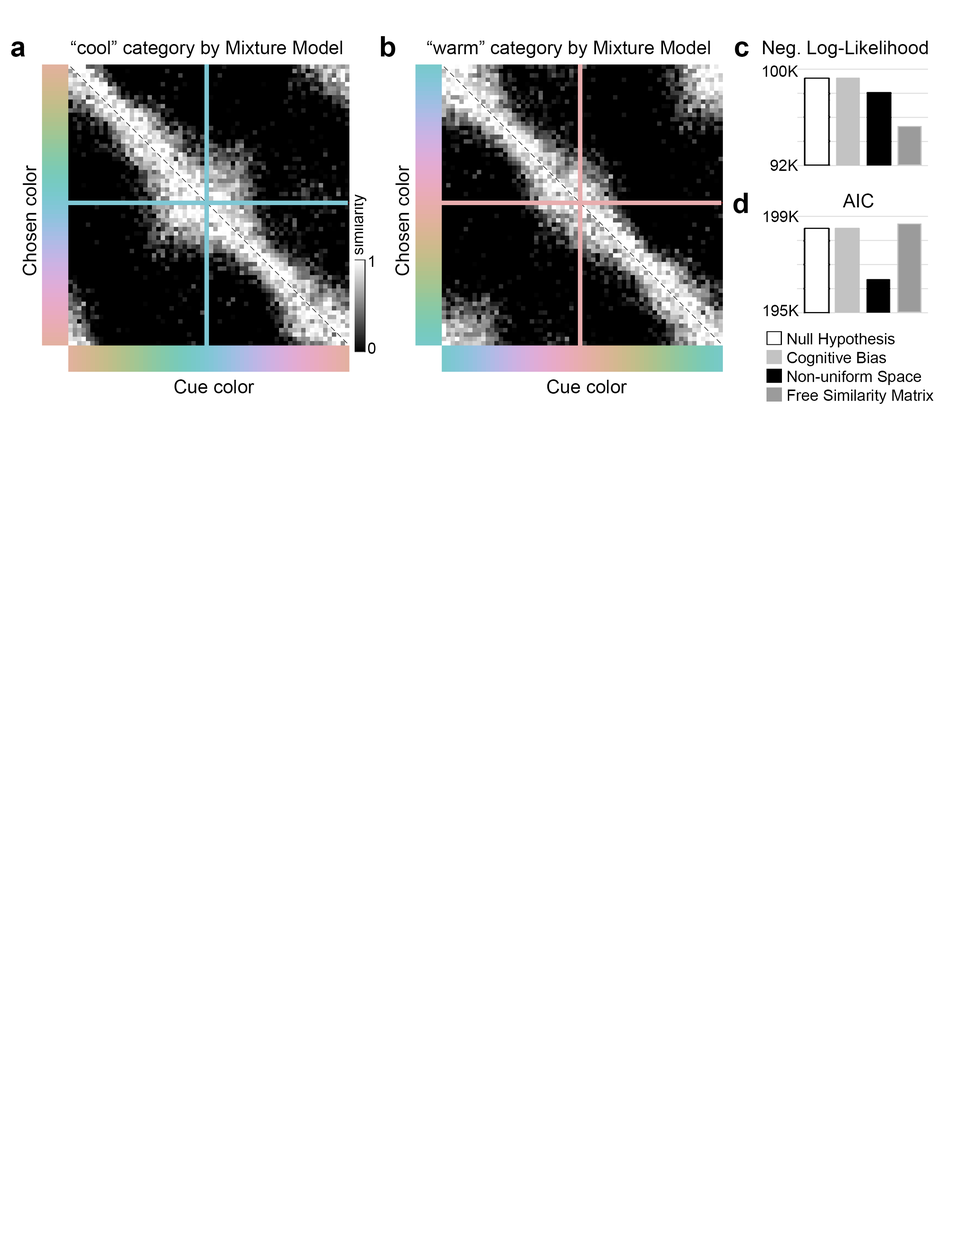
<style>
.page{position:relative;width:960px;height:1242px;background:#ffffff}
.page>*{position:absolute;margin:0}
.t1{font:18.8px "ArialMT";color:#000000}
.t2{font:15.7px "ArialMT";color:#000000}
.t3{font:15.7px/21.8px "ArialMT";color:#000000}
</style>
<div class="page">
<p class="t1" style="left:71px;top:41px;width:271px;height:17px">“cool” category by Mixture Model</p>
<p class="t1" style="left:427px;top:41px;width:283px;height:17px">“warm” category by Mixture Model</p>
<p class="t1" style="left:763px;top:41px;width:165px;height:17px">Neg. Log-Likelihood</p>
<p class="t2" style="left:763px;top:65px;width:35px;height:106px;text-align:right">100K<br><br><br><br><br>92K</p>
<p class="t1" style="left:23px;top:165px;width:14px;height:111px;rotate:-90deg">Chosen color</p>
<p class="t1" style="left:395px;top:165px;width:14px;height:111px;rotate:-90deg">Chosen color</p>
<p class="t2" style="left:352px;top:194px;width:15px;height:61px;rotate:-90deg">similarity</p>
<p class="t1" style="left:843px;top:193px;width:31px;height:15px">AIC</p>
<p class="t2" style="left:763px;top:211px;width:36px;height:105px;text-align:right">199K<br><br><br><br><br>195K</p>
<p class="t3" style="left:368px;top:256px;width:8px;height:98px">1<br><br><br><br>0</p>
<p class="t2" style="left:787px;top:333px;width:147px;height:71px">Null Hypothesis<br>Cognitive Bias<br>Non-uniform Space<br>Free Similarity Matrix</p>
<p class="t1" style="left:174px;top:379px;width:80px;height:15px">Cue color</p>
<p class="t1" style="left:547px;top:379px;width:80px;height:15px">Cue color</p>
</div>
